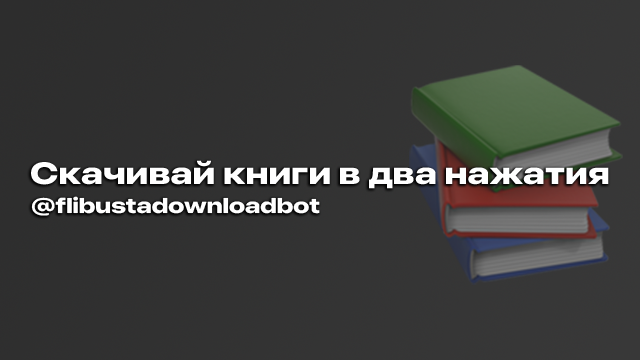
<style>
.page{position:relative;width:640px;height:360px}
.page>*{position:absolute;margin:0}
.t1{font:30.6px "SFPro-ExpandedHeavy";color:#ffffff}
.t2{font:21.3px "SFPro-ExpandedHeavy";color:#ffffff}
</style>
<div class="page">
<p class="t1" style="left:31px;top:160px;width:578px;height:29px">Cкачивай книги в два нажатия</p>
<p class="t2" style="left:31px;top:196px;width:289px;height:20px">@flibustadownloadbot</p>
</div>
